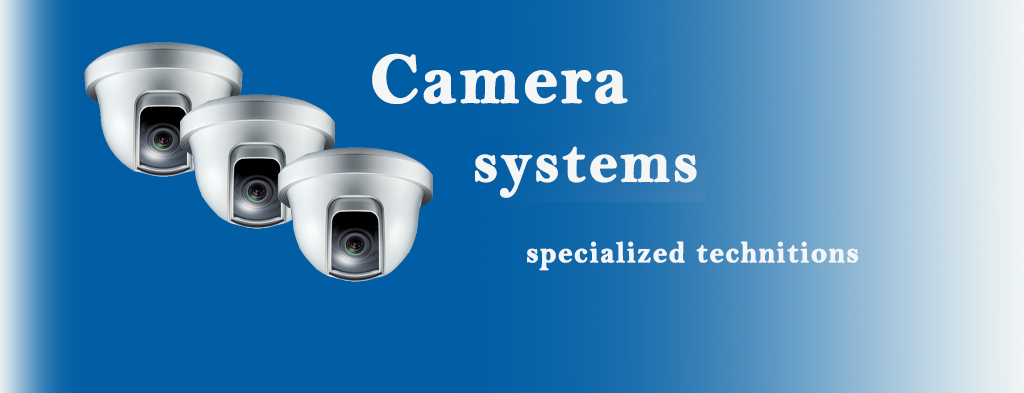
<style>
.page{position:relative;width:1024px;height:393px;background:#015ea4}
.page>*{position:absolute;margin:0}
.t1{font:72px "BellMTBold";letter-spacing:0.025em;color:#f4f6f5;font-weight:bold}
.t2{font:30px "BellMTBold";letter-spacing:0.025em;color:#f2f6f9;font-weight:bold}
</style>
<div class="page">
<p class="t1" style="left:372px;top:53px;width:256px;height:51px">Camera</p>
<p class="t2" style="left:527px;top:241px;width:332px;height:30px">specialized technitions</p>
</div>
